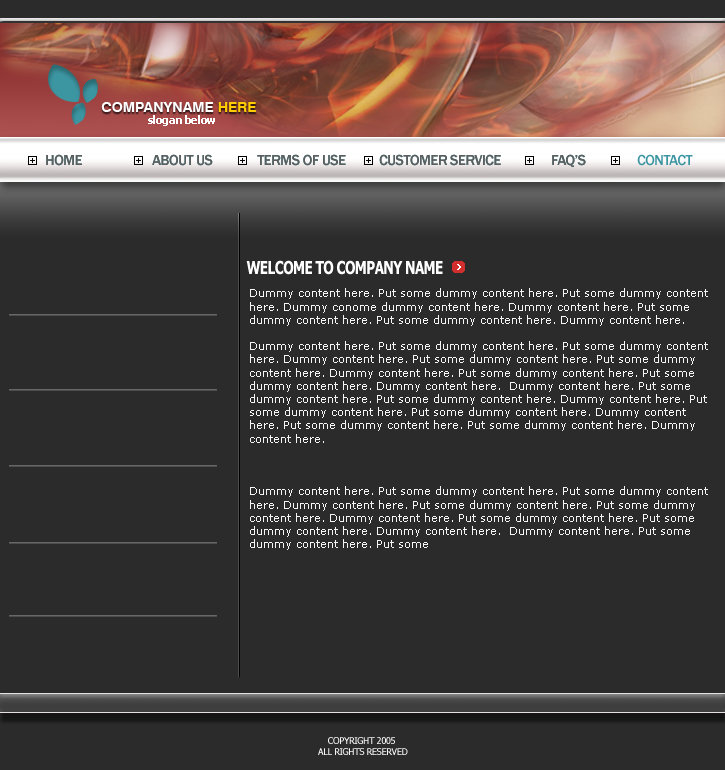
<style>
.page{position:relative;width:725px;height:770px;background:#2b2b2b}
.page>*{position:absolute;margin:0}
.t1{font:14px "Swiss721BT-Bold";color:#ffffff}
.t2{font:14px "Swiss721BT-Bold";color:#ffcc00}
.t3{font:10.8px "Tahoma-Bold";color:#ffffff}
.t4{font:15px "FranklinGothic-Medium";letter-spacing:-0.04em;color:#5d5d5d;text-transform:uppercase}
.t5{font:15px "FranklinGothic-Medium";letter-spacing:-0.04em;color:#3c96a2;text-transform:uppercase}
.t6{font:17.7px "Tahoma-Bold";letter-spacing:-0.04em;color:#ffffff;text-transform:uppercase;scale:0.76 1}
.t7{font:11px "Verdana";color:#f6f5f5}
.t8{font:9.2px "Tahoma";letter-spacing:-0.04em;color:#f6f5f5;text-transform:uppercase}
</style>
<div class="page">
<p class="t1" style="left:101px;top:102px;width:155px;height:10px">COMPANYNAME <span class="t2">HERE</span></p>
<p class="t3" style="left:148px;top:115px;width:67px;height:11px">slogan below</p>
<p class="t4" style="left:46px;top:154px;width:36px;height:12px">home</p>
<p class="t4" style="left:46px;top:154px;width:36px;height:12px">home</p>
<p class="t4" style="left:152px;top:154px;width:61px;height:12px">about us</p>
<p class="t4" style="left:152px;top:154px;width:61px;height:12px">about us</p>
<p class="t4" style="left:257px;top:154px;width:89px;height:12px">terms of use</p>
<p class="t4" style="left:257px;top:154px;width:89px;height:12px">terms of use</p>
<p class="t4" style="left:379px;top:154px;width:122px;height:12px">CUSTOMER SERVICE</p>
<p class="t4" style="left:379px;top:154px;width:122px;height:12px">CUSTOMER SERVICE</p>
<p class="t4" style="left:552px;top:154px;width:34px;height:13px">FAQ’s</p>
<p class="t4" style="left:552px;top:154px;width:34px;height:13px">FAQ’s</p>
<p class="t5" style="left:637px;top:154px;width:56px;height:12px">contact</p>
<p class="t6" style="left:246px;top:260px;width:197px;height:15px">WELCOME TO COMPANY NAME</p>
<p class="t7" style="left:249px;top:288px;width:463px;height:380px">Dummy content here. Put some dummy content here. Put some dummy content here. Dummy conome dummy content here. Dummy content here. Put some dummy content here. Put some dummy content here. Dummy content here. <br><br>Dummy content here. Put some dummy content here. Put some dummy content here. Dummy content here. Put some dummy content here. Put some dummy content here. Dummy content here. Put some dummy content here. Put some dummy content here. Dummy content here.  Dummy content here. Put some dummy content here. Put some dummy content here. Dummy content here. Put some dummy content here. Put some dummy content here. Dummy content here. Put some dummy content here. Put some dummy content here. Dummy content here.  <br><br><br><br>Dummy content here. Put some dummy content here. Put some dummy content here. Dummy content here. Put some dummy content here. Put some dummy content here. Dummy content here. Put some dummy content here. Put some dummy content here. Dummy content here.  Dummy content here. Put some dummy content here. Put some</p>
<p class="t8" style="left:318px;top:737px;width:90px;height:18px;text-align:center">copyright 2005 <br>All rights reserved</p>
</div>
